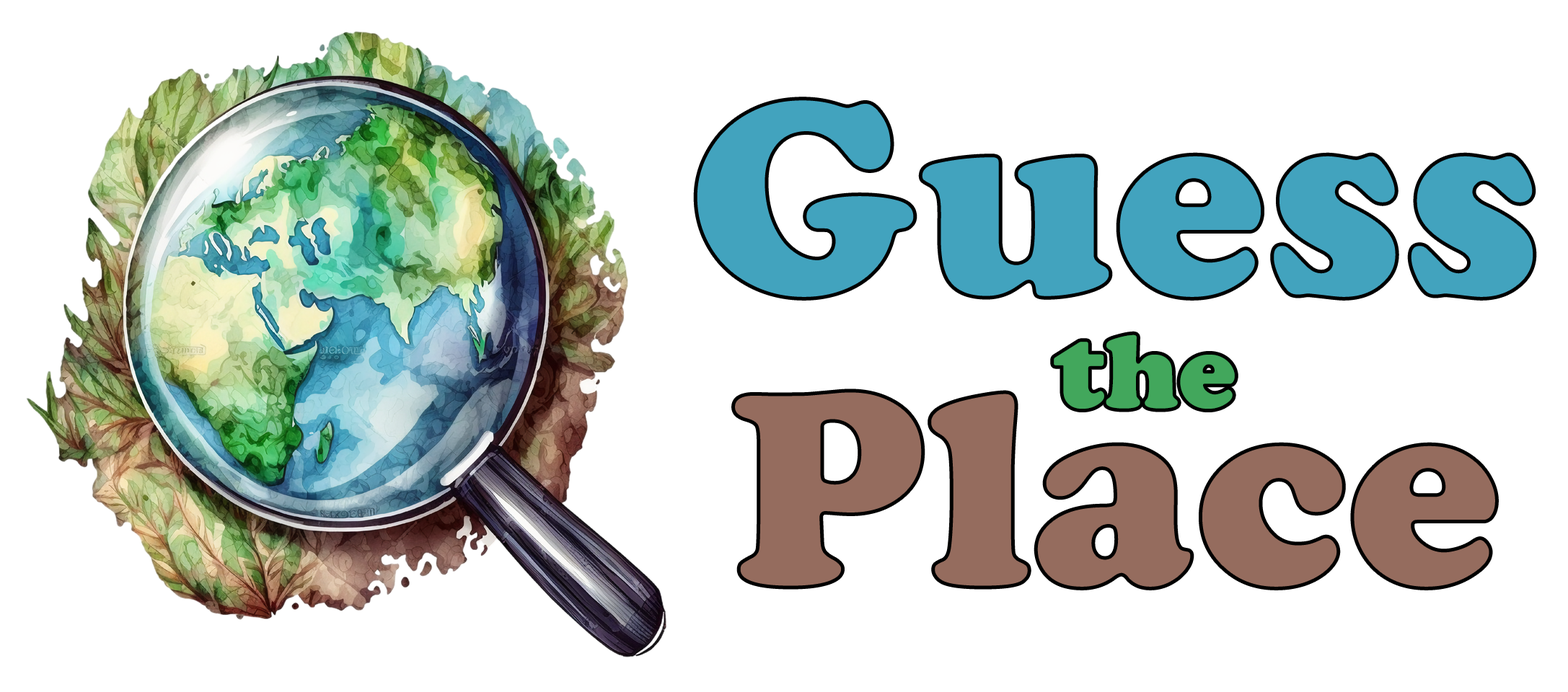
<style>
.page{position:relative;width:1568px;height:692px;background:#ffffff}
.page>*{position:absolute;margin:0}
.t1{font:288.5px "CooperBlack";color:#42a3be}
.t2{font:108.2px "CooperBlack";color:#42a75c}
.t3{font:288.5px "CooperBlack";color:#956c5e}
</style>
<div class="page">
<p class="t1" style="left:695px;top:98px;width:840px;height:201px">Guess</p>
<p class="t2" style="left:1054px;top:335px;width:181px;height:74px">the</p>
<p class="t3" style="left:733px;top:391px;width:764px;height:198px">Place</p>
</div>
